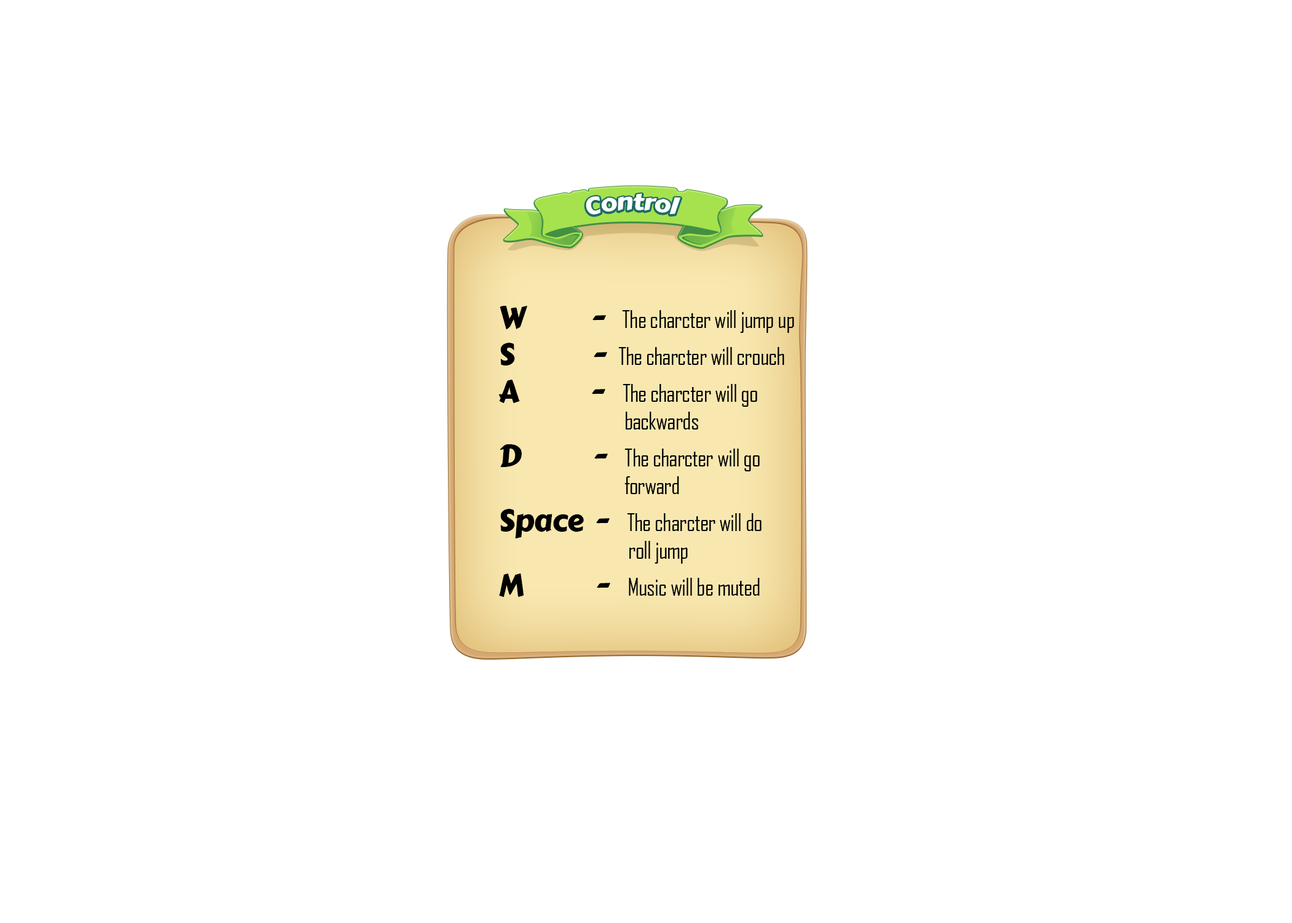
<style>
.page{position:relative;width:1292px;height:923px;background:#ffffff}
.page>*{position:absolute;margin:0}
.t1{font:23.4px "CarterOne";letter-spacing:-0.02em;color:#ffffff}
.t2{font:23.1px "AgencyFB-Reg";letter-spacing:-0.02em;color:#000000}
.t3{font:30.8px "CarterOne";letter-spacing:-0.02em;color:#000000}
</style>
<div class="page">
<p class="t1" style="left:586px;top:193px;width:94px;height:22px">Control</p>
<p class="t2" style="left:499px;top:306px;width:295px;height:291px"><span class="t3">W           -   </span>The charcter will jump up<br><span class="t3">S             -  </span>The charcter will crouch<br><span class="t3">A            -   </span>The charcter will go <br>                               backwards<br><span class="t3">D            -   </span>The charcter will go <br>                               forward<br><span class="t3">Space  -   </span>The charcter will do <br>                                roll jump<br><span class="t3">M            -   </span>Music will be muted</p>
</div>
